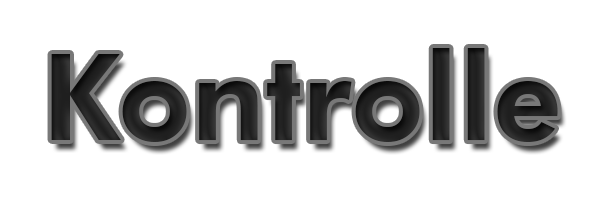
<style>
.page{position:relative;width:600px;height:200px;background:#ffffff}
.page>*{position:absolute;margin:0}
.t1{font:120px "FuturaBT-Heavy";color:#212121}
</style>
<div class="page">
<p class="t1" style="left:51px;top:48px;width:507px;height:94px">Kontrolle</p>
</div>
